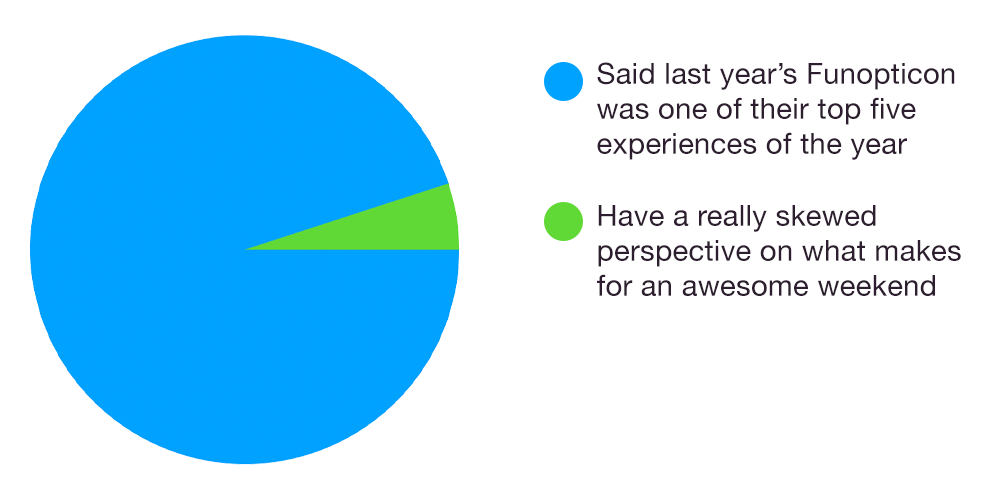
<style>
.page{position:relative;width:1000px;height:500px;background:#ffffff}
.page>*{position:absolute;margin:0}
.t1{font:29.2px "HelveticaNeue";letter-spacing:0.01em;color:#2d1e2f}
</style>
<div class="page">
<p class="t1" style="left:597px;top:62px;width:358px;height:98px">Said last year’s Funopticon was one of their top five experiences of the year</p>
<p class="t1" style="left:597px;top:205px;width:364px;height:91px">Have a really skewed perspective on what makes for an awesome weekend</p>
</div>
